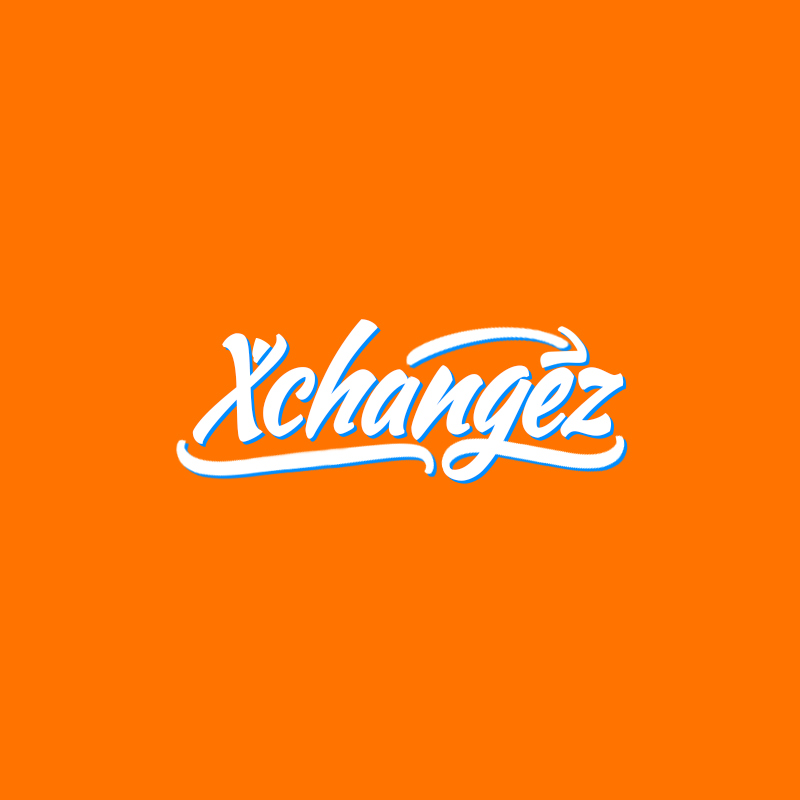
<style>
.page{position:relative;width:800px;height:800px;background:#ff7300}
.page>*{position:absolute;margin:0}
.t1{font:132px "KaushanScript-Regular";letter-spacing:-0.05em;color:#ffffff;font-weight:bold;font-style:italic;scale:0.86 1}
</style>
<div class="page">
<p class="t1" style="left:192px;top:319px;width:432px;height:162px">Xchangez</p>
</div>
